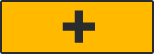
<style>
.page{position:relative;width:154px;height:54px;background:#ffba00}
.page>*{position:absolute;margin:0}
.t1{font:63px "FrutigerLTStd-Black";letter-spacing:0.066em;color:#2a2b2d}
</style>
<div class="page">
<p class="t1" style="left:62px;top:10px;width:33px;height:33px">+</p>
</div>
